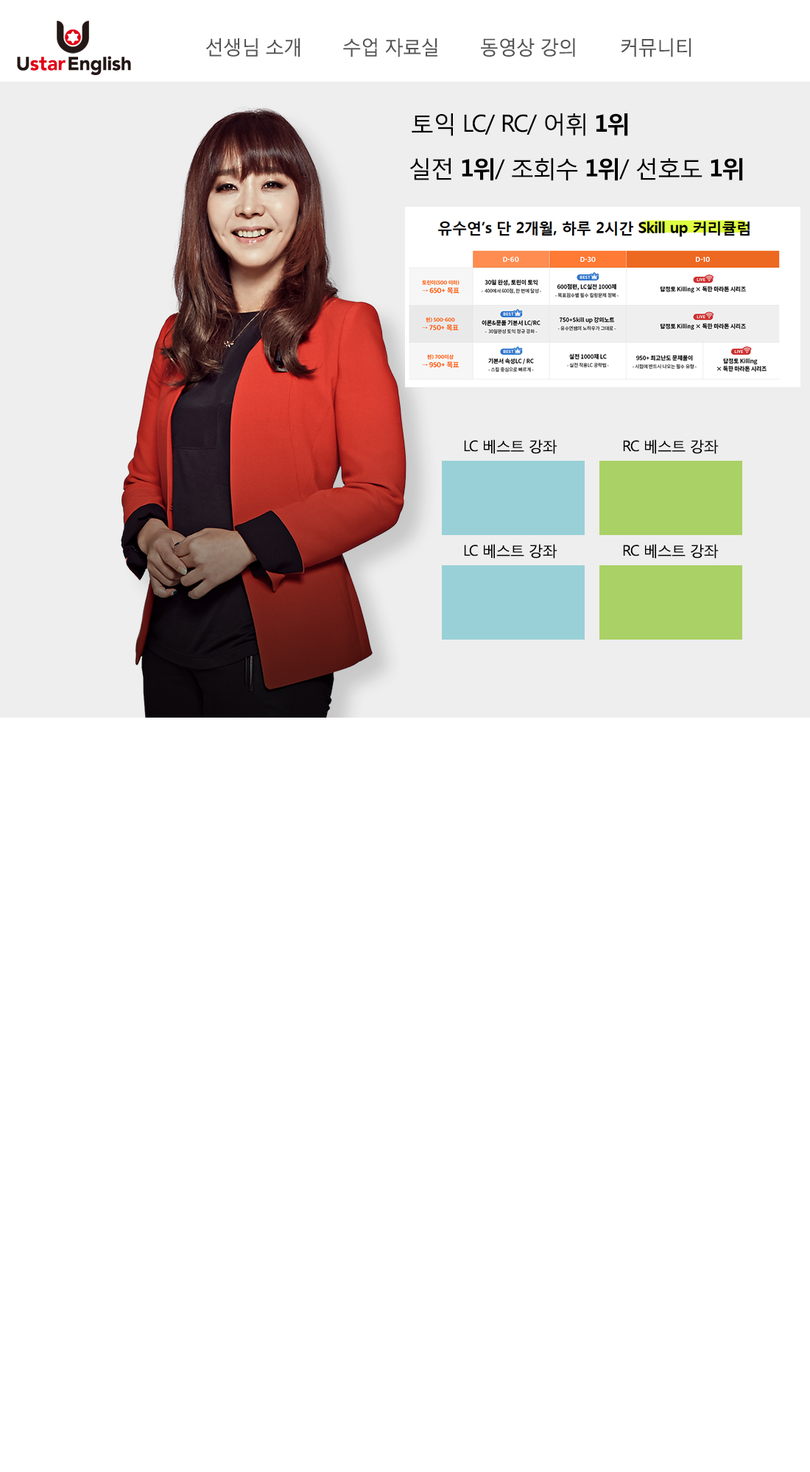
<style>
.page{position:relative;width:810px;height:1472px;background:#ffffff}
.page>*{position:absolute;margin:0}
.t1{font:19.5px "MalgunGothicRegular";letter-spacing:-0.05em;color:#555555}
.t2{font:23.6px "MalgunGothicRegular";letter-spacing:-0.05em;color:#000000}
.t3{font:23.6px "MalgunGothicBold";letter-spacing:-0.05em;color:#000000}
.t4{font:14.7px "MalgunGothicRegular";letter-spacing:-0.05em;color:#000000}
</style>
<div class="page">
<p class="t1" style="left:206px;top:38px;width:94px;height:19px">선생님 소개</p>
<p class="t1" style="left:343px;top:38px;width:94px;height:19px">수업 자료실</p>
<p class="t1" style="left:481px;top:38px;width:94px;height:19px">동영상 강의</p>
<p class="t1" style="left:621px;top:38px;width:70px;height:19px">커뮤니티</p>
<p class="t2" style="left:412px;top:113px;width:216px;height:23px">토익 LC/ RC/ 어휘 <span class="t3">1위</span></p>
<p class="t2" style="left:409px;top:158px;width:334px;height:23px">실전 <span class="t3">1위</span>/ 조회수 <span class="t3">1위</span>/ 선호도 <span class="t3">1위</span></p>
<p class="t4" style="left:464px;top:440px;width:93px;height:14px">LC 베스트 강좌</p>
<p class="t4" style="left:623px;top:440px;width:96px;height:14px">RC 베스트 강좌</p>
<p class="t4" style="left:464px;top:544px;width:93px;height:15px">LC 베스트 강좌</p>
<p class="t4" style="left:623px;top:544px;width:96px;height:15px">RC 베스트 강좌</p>
</div>
